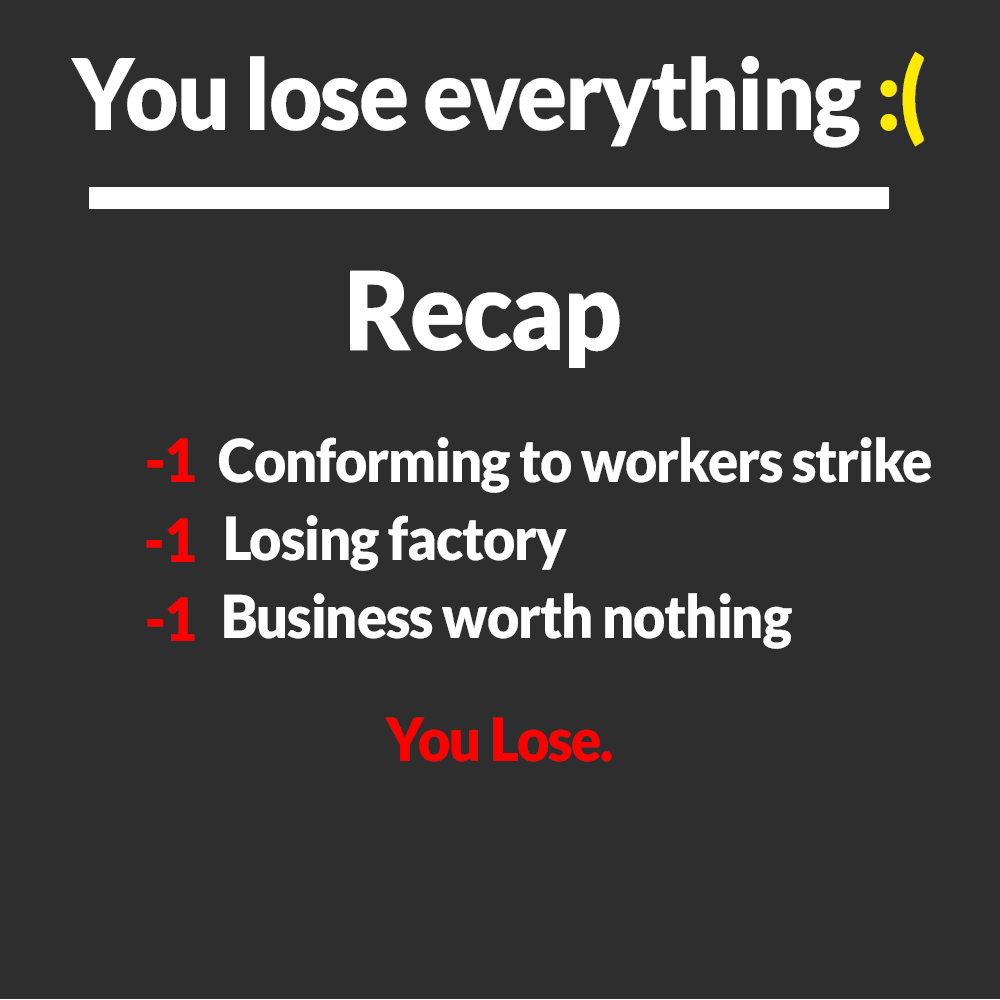
<style>
.page{position:relative;width:1000px;height:1000px;background:#2e2e2e}
.page>*{position:absolute;margin:0}
.t1{font:98.7px "Lato-Black";letter-spacing:-0.02em;color:#ffffff;scale:0.93 1}
.t2{font:98.7px "Lato-Black";letter-spacing:-0.02em;color:#ffea00;scale:0.93 1}
.t3{font:108.7px "Lato-Black";letter-spacing:-0.02em;color:#ffffff;scale:0.93 1}
.t4{font:59.3px "Lato-Black";letter-spacing:-0.02em;color:#ff0000;scale:0.94 1}
.t5{font:59.3px "Lato-Black";letter-spacing:-0.02em;color:#ffffff;scale:0.94 1}
</style>
<div class="page">
<p class="t1" style="left:71px;top:51px;width:853px;height:97px">You lose everything <span class="t2">:(</span></p>
<p class="t3" style="left:350px;top:270px;width:270px;height:98px">Recap</p>
<p class="t4" style="left:147px;top:438px;width:48px;height:44px">-1</p>
<p class="t5" style="left:219px;top:437px;width:712px;height:56px">Conforming to workers strike</p>
<p class="t4" style="left:146px;top:518px;width:49px;height:44px">-1</p>
<p class="t5" style="left:226px;top:515px;width:341px;height:56px">Losing factory</p>
<p class="t5" style="left:224px;top:593px;width:568px;height:56px">Business worth nothing</p>
<p class="t4" style="left:147px;top:597px;width:48px;height:44px">-1</p>
<p class="t4" style="left:385px;top:717px;width:227px;height:45px">You Lose.</p>
</div>
